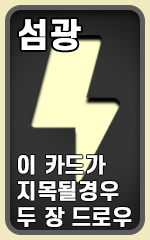
<style>
.page{position:relative;width:150px;height:240px}
.page>*{position:absolute;margin:0}
.t1{font:32.7px "S-CoreDream-6Bold";color:#ffffff;font-weight:bold}
.t2{font:21.1px/25.9px "S-CoreDream-6Bold";color:#ffffff;font-weight:bold}
</style>
<div class="page">
<p class="t1" style="left:19px;top:19px;width:62px;height:32px">섬광</p>
<p class="t2" style="left:17px;top:155px;width:115px;height:72px">이 카드가<br>지목될경우<br>두 장 드로우</p>
</div>
